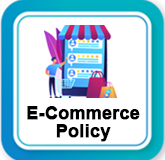
<style>
.page{position:relative;width:165px;height:160px;background:#ffffff}
.page>*{position:absolute;margin:0}
.t1{font:17.7px/17.7px "Arial-BoldMT";color:#000000;font-weight:bold}
</style>
<div class="page">
<p class="t1" style="left:27px;top:106px;width:113px;height:36px;text-align:center">E-Commerce<br>Policy</p>
</div>
